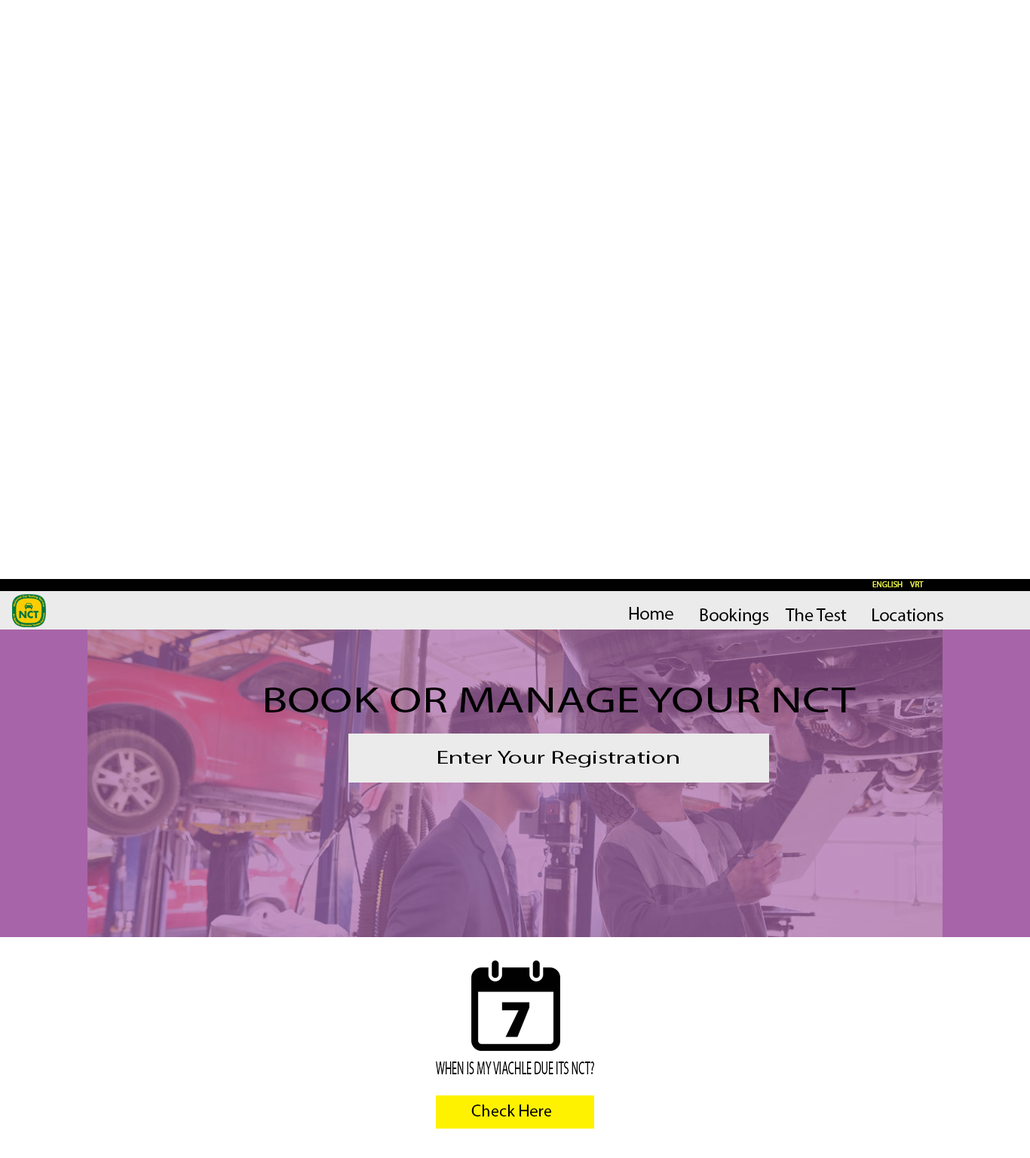
<style>
.page{position:relative;width:1030px;height:1158px;background:#ffffff}
.page>*{position:absolute;margin:0}
.t1{font:8.3px "MyriadPro-Regular";color:#e4ee48}
.t2{font:18.1px "MyriadPro-Regular";color:#000000}
.t3{font:36.2px "MyriadPro-Regular";color:#000000;scale:1.32 1}
.t4{font:18.1px "MyriadPro-Regular";color:#000000;scale:1.42 1}
.t5{font:18.1px "MyriadPro-Regular";color:#000000;scale:0.6 1}
.t6{font:17px "MyriadPro-Regular";color:#000000}
</style>
<div class="page">
<p class="t1" style="left:872px;top:581px;width:30px;height:6px">ENGLISH</p>
<p class="t1" style="left:910px;top:581px;width:13px;height:6px">VRT</p>
<p class="t2" style="left:629px;top:607px;width:44px;height:13px">Home</p>
<p class="t2" style="left:700px;top:608px;width:69px;height:17px">Bookings</p>
<p class="t2" style="left:785px;top:608px;width:62px;height:13px">The Test</p>
<p class="t2" style="left:872px;top:608px;width:71px;height:13px">Locations</p>
<p class="t3" style="left:265px;top:688px;width:591px;height:24px">BOOK OR MANAGE YOUR NCT</p>
<p class="t4" style="left:438px;top:751px;width:240px;height:16px">Enter Your Registration</p>
<p class="t5" style="left:436px;top:1061px;width:158px;height:13px">WHEN IS MY VIACHLE DUE ITS NCT?</p>
<p class="t6" style="left:471px;top:1104px;width:81px;height:12px">Check Here</p>
</div>
